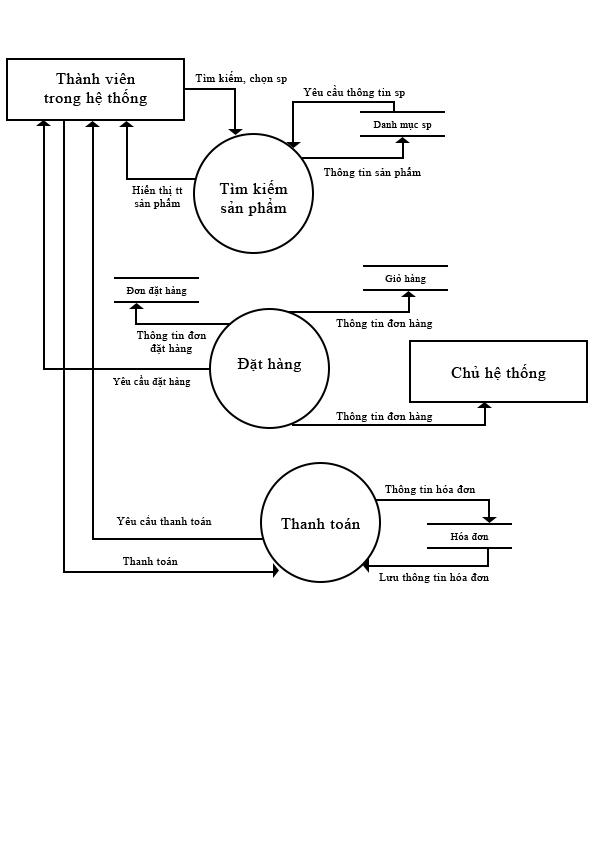
<style>
.page{position:relative;width:595px;height:842px;background:#ffffff}
.page>*{position:absolute;margin:0}
.t1{font:15.9px "TimesNewRomanPSMT";letter-spacing:0.05em;color:#000000}
.t2{font:11px "TimesNewRomanPSMT";letter-spacing:0.05em;color:#000000}
.t3{font:10px "TimesNewRomanPSMT";letter-spacing:0.05em;color:#000000}
</style>
<div class="page">
<p class="t1" style="left:44px;top:73px;width:103px;height:33px;text-align:center">Thành viên<br>trong hệ thống</p>
<p class="t2" style="left:195px;top:71px;width:92px;height:13px">Tìm kiếm, chọn sp</p>
<p class="t2" style="left:303px;top:85px;width:102px;height:13px">Yêu cầu thông tin sp</p>
<p class="t3" style="left:373px;top:121px;width:59px;height:9px">Danh mục sp</p>
<p class="t2" style="left:323px;top:167px;width:98px;height:11px">Thông tin sản phẩm</p>
<p class="t2" style="left:132px;top:185px;width:51px;height:24px;text-align:center">Hiển thị tt<br>sản phẩm</p>
<p class="t1" style="left:219px;top:180px;width:69px;height:36px;text-align:center">Tìm kiếm<br>sản phẩm</p>
<p class="t3" style="left:385px;top:274px;width:41px;height:10px">Giỏ hàng</p>
<p class="t3" style="left:126px;top:286px;width:61px;height:10px">Đơn đặt hàng</p>
<p class="t2" style="left:336px;top:319px;width:97px;height:10px">Thông tin đơn hàng</p>
<p class="t2" style="left:136px;top:331px;width:71px;height:23px;text-align:center">Thông tin đơn<br>đặt hàng</p>
<p class="t1" style="left:237px;top:358px;width:64px;height:14px">Đặt hàng</p>
<p class="t1" style="left:451px;top:364px;width:95px;height:17px">Chủ hệ thống</p>
<p class="t3" style="left:113px;top:375px;width:78px;height:12px">Yêu cầu đặt hàng</p>
<p class="t2" style="left:336px;top:412px;width:97px;height:10px">Thông tin đơn hàng</p>
<p class="t2" style="left:385px;top:485px;width:91px;height:10px">Thông tin hóa đơn</p>
<p class="t2" style="left:116px;top:515px;width:96px;height:10px">Yêu cầu thanh toán</p>
<p class="t1" style="left:281px;top:518px;width:79px;height:11px">Thanh toán</p>
<p class="t3" style="left:450px;top:532px;width:39px;height:8px">Hóa đơn</p>
<p class="t2" style="left:122px;top:557px;width:56px;height:8px">Thanh toán</p>
<p class="t2" style="left:379px;top:573px;width:110px;height:10px">Lưu thông tin hóa đơn</p>
</div>
